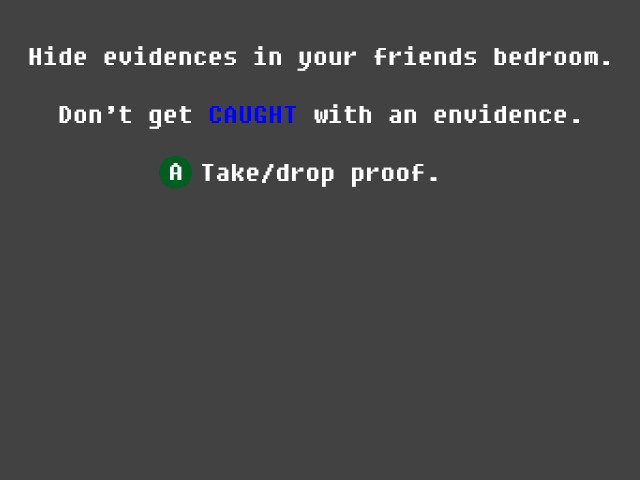
<style>
.page{position:relative;width:640px;height:480px;background:#424242}
.page>*{position:absolute;margin:0}
.t1{font:24px "Fixedsys";color:#ffffff}
.t2{font:24px "Fixedsys";color:#0000ff}
</style>
<div class="page">
<p class="t1" style="left:29px;top:46px;width:580px;height:141px;text-align:center">Hide evidences in your friends bedroom.<br><br>Don’t get <span class="t2">CAUGHT</span> with an envidence.<br><br>Take/drop proof.</p>
<p class="t1" style="left:170px;top:163px;width:12px;height:17px">A</p>
</div>
